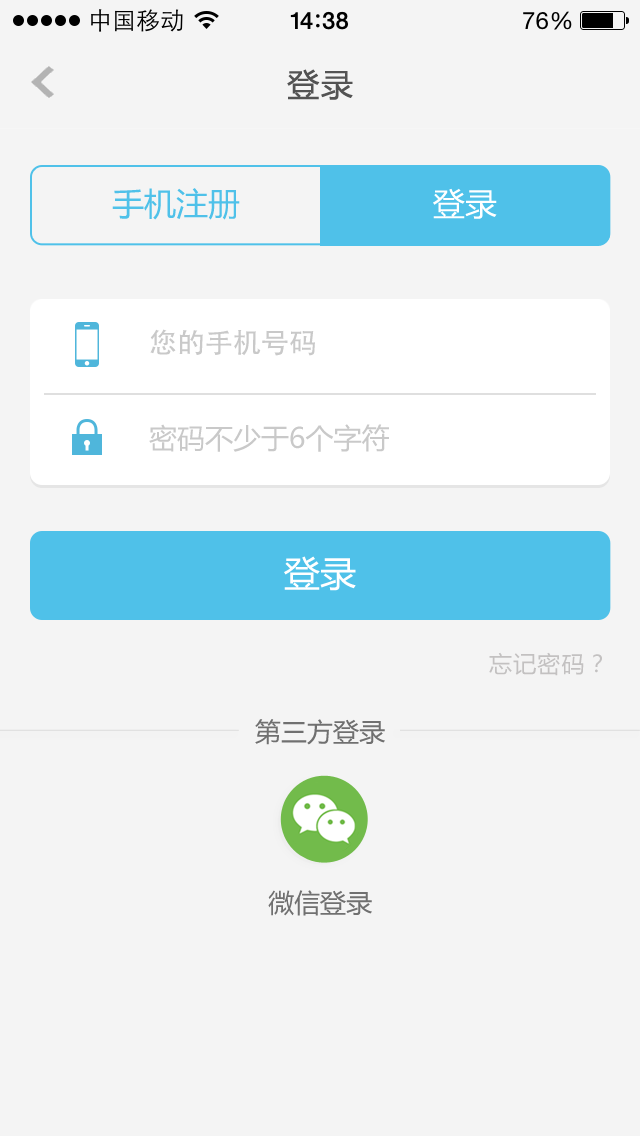
<style>
.page{position:relative;width:640px;height:1136px;background:#f4f4f4}
.page>*{position:absolute;margin:0}
.t1{font:32px "MicrosoftYaHei";letter-spacing:0.05em;color:#535353}
.t2{font:32px "MicrosoftYaHei";color:#4fc1e9}
.t3{font:32px "MicrosoftYaHei";color:#ffffff}
.t4{font:28px "AdobeHeitiStd-Regular";color:#c9c9c9}
.t5{font:28px "MicrosoftYaHei";color:#c9c9c9}
.t6{font:36px "MicrosoftYaHei";color:#ffffff}
.t7{font:23px "MicrosoftYaHei";letter-spacing:0.05em;color:#c3c1c1}
.t8{font:26px "MicrosoftYaHei";color:#707070}
</style>
<div class="page">
<p class="t1" style="left:287px;top:69px;width:66px;height:31px">登录</p>
<p class="t2" style="left:112px;top:188px;width:128px;height:32px">手机注册</p>
<p class="t3" style="left:433px;top:188px;width:64px;height:31px">登录</p>
<p class="t4" style="left:150px;top:329px;width:165px;height:27px">您的手机号码</p>
<p class="t5" style="left:149px;top:424px;width:240px;height:28px">密码不少于6个字符</p>
<p class="t6" style="left:284px;top:556px;width:72px;height:35px">登录</p>
<p class="t7" style="left:489px;top:652px;width:113px;height:24px">忘记密码？</p>
<p class="t8" style="left:255px;top:719px;width:130px;height:26px">第三方登录</p>
<p class="t8" style="left:268px;top:890px;width:104px;height:26px">微信登录</p>
</div>
